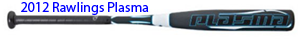
<style>
.page{position:relative;width:300px;height:39px;background:#ffffff}
.page>*{position:absolute;margin:0}
.t1{font:14px "MyriadPro-Regular";color:#0000ff}
</style>
<div class="page">
<p class="t1" style="left:21px;top:2px;width:128px;height:13px">2012 Rawlings Plasma</p>
</div>
